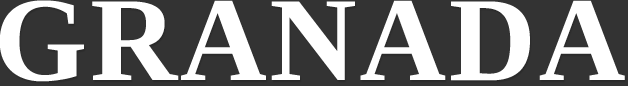
<style>
.page{position:relative;width:628px;height:86px;background:#333333}
.page>*{position:absolute;margin:0}
.t1{font:120px "Tinos-Bold";letter-spacing:0.025em;color:#ffffff}
</style>
<div class="page">
<p class="t1" style="left:0px;top:0px;width:625px;height:82px">GRANADA</p>
</div>
